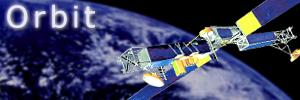
<style>
.page{position:relative;width:300px;height:100px}
.page>*{position:absolute;margin:0}
.t1{font:30px "MSReferenceSansSerif";letter-spacing:0.125em;color:#e6e9f2}
</style>
<div class="page">
<p class="t1" style="left:7px;top:4px;width:88px;height:24px">Orbit</p>
</div>
